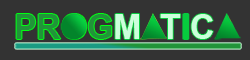
<style>
.page{position:relative;width:250px;height:60px;background:#333333}
.page>*{position:absolute;margin:0}
.t1{font:33.6px "Arial-BoldMT";color:#219439}
.t2{font:33.6px "Arial-BoldMT";color:#cbffdb}
.t3{font:33.6px "Arial-BoldMT";color:#07cc3e}
</style>
<div class="page">
<p class="t1" style="left:16px;top:14px;width:96px;height:25px">PROG</p>
<p class="t2" style="left:115px;top:14px;width:98px;height:25px">M  T<span class="t3">I</span>C</p>
</div>
